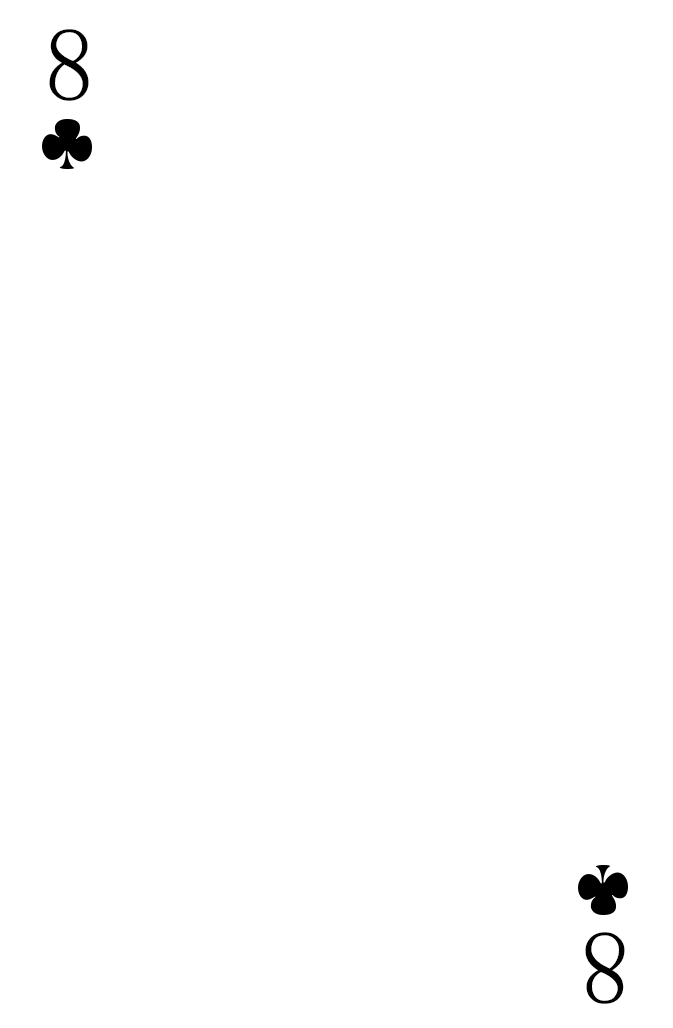
<style>
.page{position:relative;width:673px;height:1028px;background:#ffffff}
.page>*{position:absolute;margin:0}
.t1{font:104.2px "SimSun-ExtB";color:#010101;scale:0.93 1}
</style>
<div class="page">
<p class="t1" style="left:49px;top:29px;width:40px;height:72px">8</p>
<p class="t1" style="left:585px;top:932px;width:40px;height:72px;rotate:180deg">8</p>
</div>
